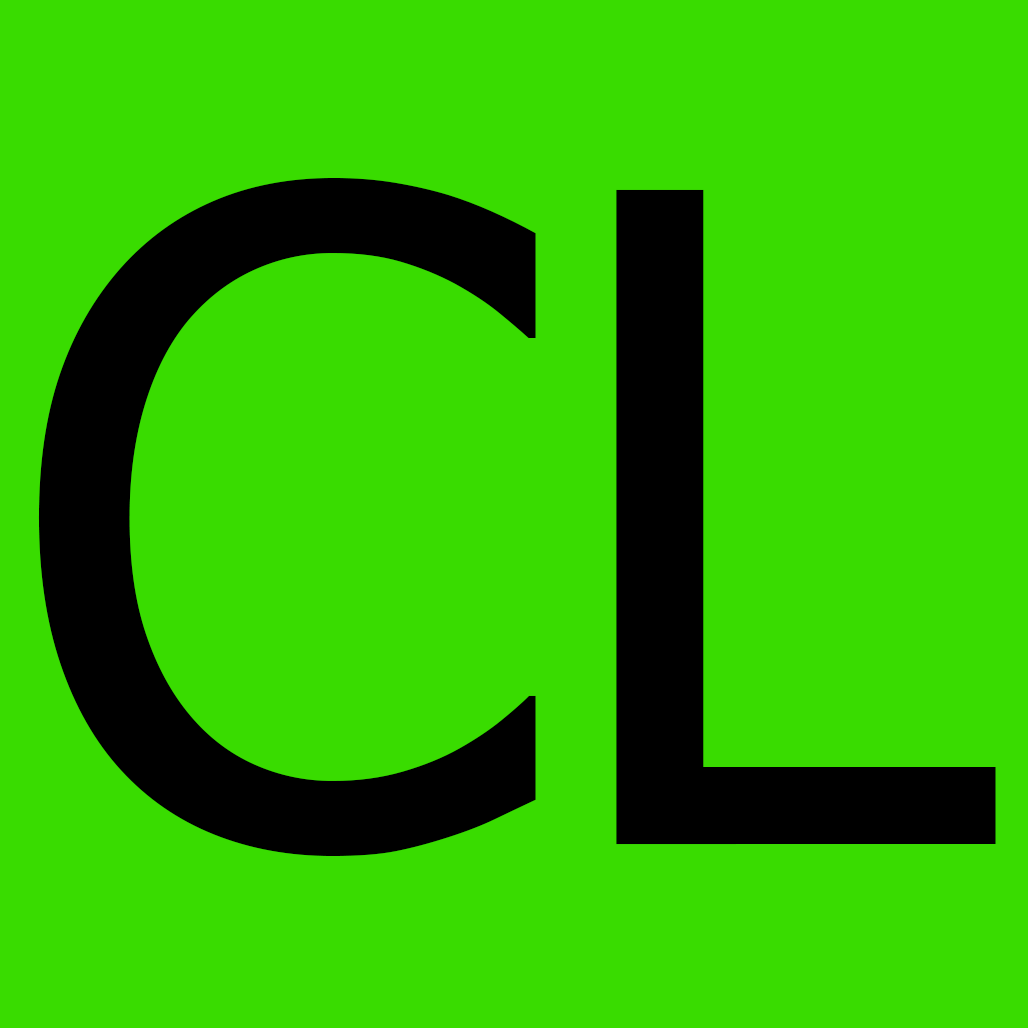
<style>
.page{position:relative;width:1028px;height:1028px;background:#39dc00}
.page>*{position:absolute;margin:0}
.t1{font:900px "Tahoma";color:#000000}
</style>
<div class="page">
<p class="t1" style="left:38px;top:177px;width:958px;height:679px">CL</p>
</div>
